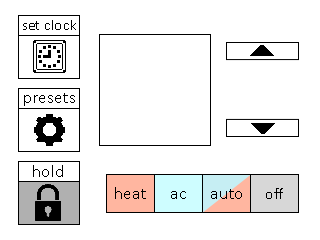
<style>
.page{position:relative;width:320px;height:240px;background:#ffffff}
.page>*{position:absolute;margin:0}
.t1{font:15.2px "Calibri";color:#000000}
.t2{font:17.2px "Calibri";color:#000000}
.t3{font:16.2px "Calibri";color:#000000}
</style>
<div class="page">
<p class="t1" style="left:23px;top:20px;width:53px;height:10px">set clock</p>
<p class="t2" style="left:24px;top:93px;width:51px;height:13px">presets</p>
<p class="t2" style="left:33px;top:165px;width:30px;height:12px">hold</p>
<p class="t2" style="left:33px;top:165px;width:30px;height:12px">hold</p>
<p class="t2" style="left:115px;top:187px;width:31px;height:12px">heat</p>
<p class="t2" style="left:115px;top:187px;width:31px;height:12px">heat</p>
<p class="t2" style="left:115px;top:187px;width:31px;height:12px">heat</p>
<p class="t2" style="left:115px;top:187px;width:31px;height:12px">heat</p>
<p class="t2" style="left:171px;top:191px;width:15px;height:8px">ac</p>
<p class="t2" style="left:171px;top:191px;width:15px;height:8px">ac</p>
<p class="t2" style="left:171px;top:191px;width:15px;height:8px">ac</p>
<p class="t2" style="left:171px;top:191px;width:15px;height:8px">ac</p>
<p class="t2" style="left:211px;top:189px;width:31px;height:10px">auto</p>
<p class="t2" style="left:211px;top:189px;width:31px;height:10px">auto</p>
<p class="t2" style="left:211px;top:189px;width:31px;height:10px">auto</p>
<p class="t2" style="left:211px;top:189px;width:31px;height:10px">auto</p>
<p class="t3" style="left:266px;top:188px;width:17px;height:11px">off</p>
<p class="t3" style="left:266px;top:188px;width:17px;height:11px">off</p>
<p class="t3" style="left:266px;top:188px;width:17px;height:11px">off</p>
<p class="t3" style="left:266px;top:188px;width:17px;height:11px">off</p>
</div>
